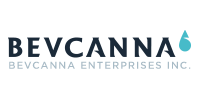
<style>
.page{position:relative;width:200px;height:100px;background:#ffffff}
.page>*{position:absolute;margin:0}
.t1{font:10px "Gotham-Medium";letter-spacing:0.1em;color:#a8bbc6}
</style>
<div class="page">
<p class="t1" style="left:9px;top:61px;width:182px;height:8px">BEVCANNA ENTERPRISES INC.</p>
</div>
